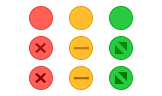
<style>
.page{position:relative;width:162px;height:96px;background:#ffffff}
.page>*{position:absolute;margin:0}
.t1{font:25px "ArialMT";letter-spacing:-0.016em;color:#8b0000}
.t2{font:16.7px "AdobeHeitiStd-Regular";letter-spacing:-0.016em;color:#aa6a03;font-weight:bold}
.t3{font:16.7px "AdobeHeitiStd-Regular";letter-spacing:-0.016em;color:#a76903;font-weight:bold}
</style>
<div class="page">
<p class="t1" style="left:35px;top:43px;width:11px;height:10px">×</p>
<p class="t2" style="left:74px;top:47px;width:15px;height:3px">一</p>
<p class="t1" style="left:35px;top:73px;width:11px;height:10px">×</p>
<p class="t3" style="left:74px;top:77px;width:15px;height:3px">一</p>
</div>
